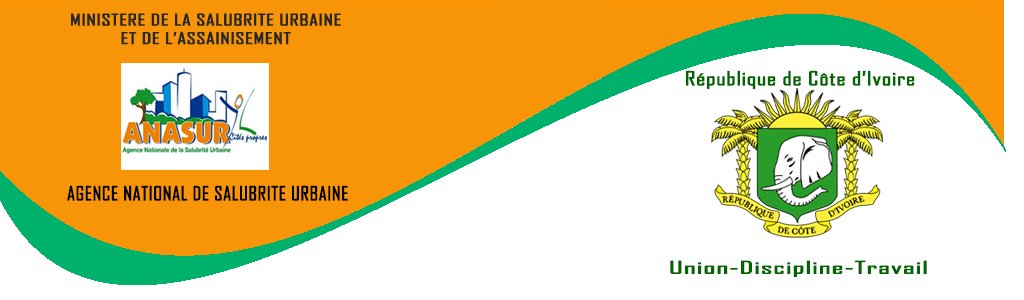
<style>
.page{position:relative;width:1024px;height:300px;background:#ffffff}
.page>*{position:absolute;margin:0}
.t1{font:18.5px "AgencyFB-Reg";letter-spacing:0.005em;color:#006600;font-weight:bold;scale:1.33 1}
.t2{font:18.5px "AgencyFB-Reg";letter-spacing:0.005em;color:#000000;font-weight:bold;scale:1.08 1}
.t3{font:16.6px "AgencyFB-Reg";letter-spacing:0.005em;color:#006600;font-weight:bold;scale:1.9 1}
</style>
<div class="page">
<p class="t1" style="left:686px;top:70px;width:229px;height:19px">République de Côte d’Ivoire</p>
<p class="t2" style="left:67px;top:185px;width:281px;height:16px">AGENCE NATIONAL DE SALUBRITE URBAINE</p>
<p class="t3" style="left:670px;top:260px;width:257px;height:17px">Union-Discipline-Travail</p>
</div>
